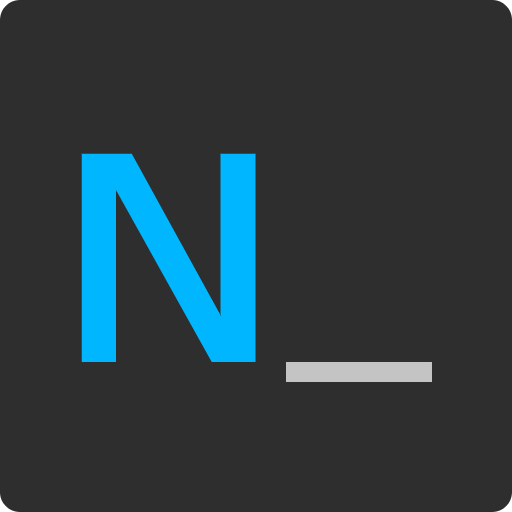
<style>
.page{position:relative;width:512px;height:512px;background:#2e2e2e}
.page>*{position:absolute;margin:0}
.t1{font:300px "AlibabaPuHuiTi-Regular";color:#00b6ff;font-weight:bold}
</style>
<div class="page">
<p class="t1" style="left:81px;top:153px;width:175px;height:209px">N</p>
</div>
